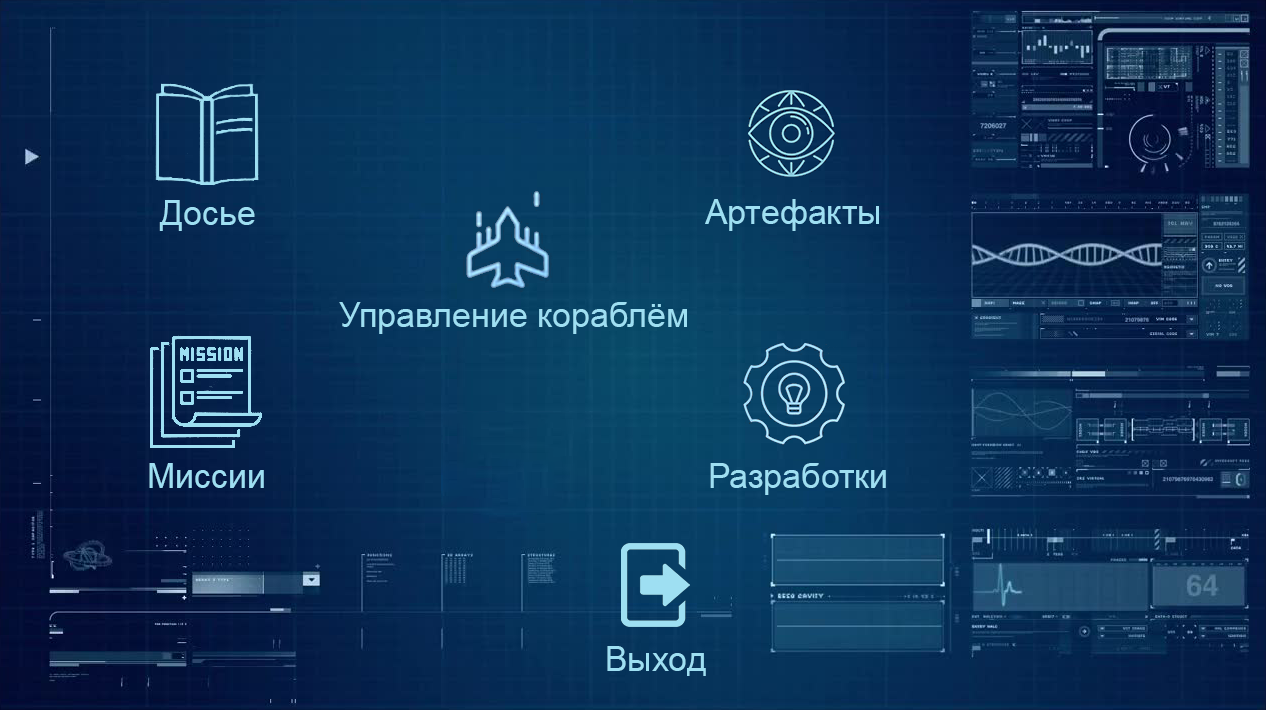
<style>
.page{position:relative;width:1266px;height:710px}
.page>*{position:absolute;margin:0}
.t1{font:34px "ArialMT";color:#9edff2}
</style>
<div class="page">
<p class="t1" style="left:159px;top:200px;width:96px;height:31px">Досье</p>
<p class="t1" style="left:705px;top:199px;width:174px;height:32px">Артефакты</p>
<p class="t1" style="left:339px;top:302px;width:348px;height:32px">Управление кораблём</p>
<p class="t1" style="left:149px;top:463px;width:115px;height:25px">Миссии</p>
<p class="t1" style="left:710px;top:463px;width:176px;height:32px">Разработки</p>
<p class="t1" style="left:607px;top:646px;width:99px;height:30px">Выход</p>
</div>
